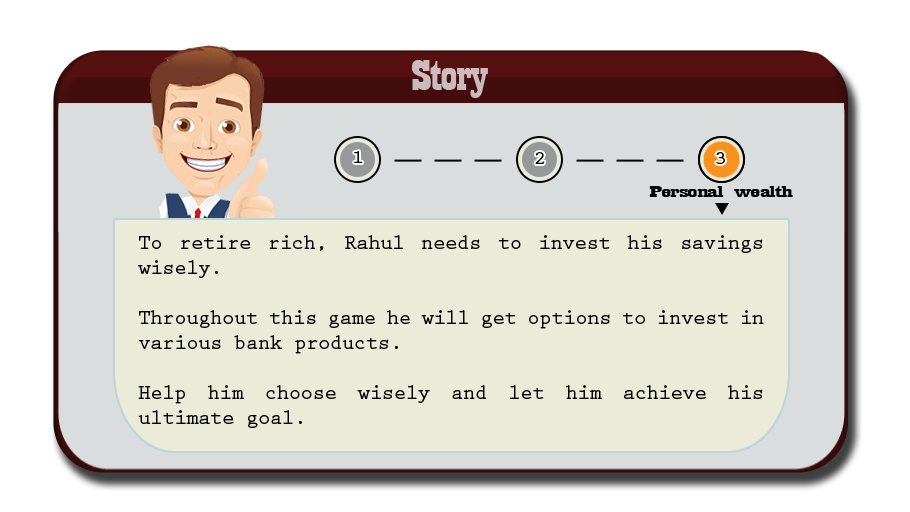
<style>
.page{position:relative;width:910px;height:512px;background:#eaebd8}
.page>*{position:absolute;margin:0}
.t1{font:44.6px "Playbill";letter-spacing:-0.025em;color:#cabbbe;scale:1.61 1}
.t2{font:18.8px "PrestigeEliteStd-Bd";letter-spacing:-0.025em;color:#020201;scale:1.18 1}
.t3{font:17.3px "Playbill";letter-spacing:-0.025em;color:#020201;scale:2.47 1}
.t4{font:20.8px "PrestigeEliteStd-Bd";letter-spacing:-0.025em;color:#020201}
</style>
<div class="page">
<p class="t1" style="left:411px;top:60px;width:77px;height:38px">Story</p>
<p class="t2" style="left:354px;top:151px;width:8px;height:12px">1</p>
<p class="t2" style="left:535px;top:152px;width:10px;height:12px">2</p>
<p class="t2" style="left:716px;top:152px;width:9px;height:12px">3</p>
<p class="t3" style="left:649px;top:186px;width:144px;height:11px">Personal wealth</p>
<p class="t4" style="left:138px;top:235px;width:626px;height:193px;text-align:justify">To retire rich, Rahul needs to invest his savings wisely. <br><br>Throughout this game he will get options to invest in various bank products. <br><br>Help him choose wisely and let him achieve his ultimate goal.<br>ALL THE BEST!!</p>
</div>
